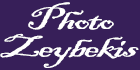
<style>
.page{position:relative;width:140px;height:70px;background:#371f59}
.page>*{position:absolute;margin:0}
.t1{font:32.2px/24.6px "BlackadderITC-Regular";letter-spacing:-0.045em;color:#ffffff;scale:1.49 1}
</style>
<div class="page">
<p class="t1" style="left:0px;top:2px;width:139px;height:66px">Photo<br>Zeybekis</p>
</div>
